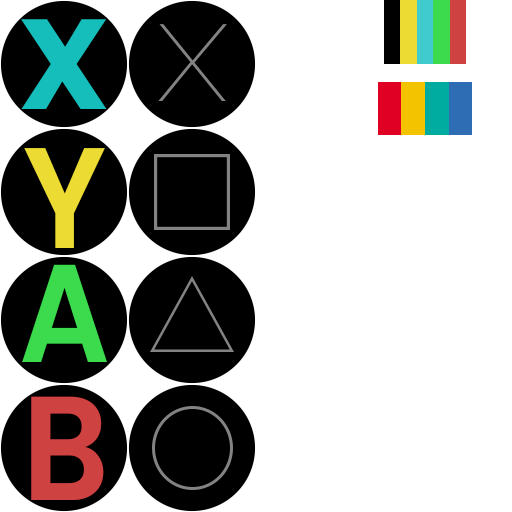
<style>
.page{position:relative;width:512px;height:512px;background:#ffffff}
.page>*{position:absolute;margin:0}
.t1{font:161.9px "Poppins-SemiBold";color:#15bebc}
.t2{font:109.1px "Poppins-Thin";color:#848484;scale:1.4 1}
.t3{font:143.1px "Poppins-SemiBold";color:#ecdb33;scale:0.92 1}
.t4{font:138.9px "Poppins-SemiBold";color:#3cdb4e;scale:0.92 1}
.t5{font:147.9px "Poppins-SemiBold";color:#d04242;scale:0.92 1}
</style>
<div class="page">
<p class="t1" style="left:21px;top:19px;width:86px;height:90px">x</p>
<p class="t2" style="left:158px;top:24px;width:69px;height:77px">X</p>
<p class="t3" style="left:24px;top:148px;width:81px;height:100px">Y</p>
<p class="t4" style="left:22px;top:264px;width:85px;height:98px">A</p>
<p class="t5" style="left:31px;top:396px;width:73px;height:104px">B</p>
</div>
